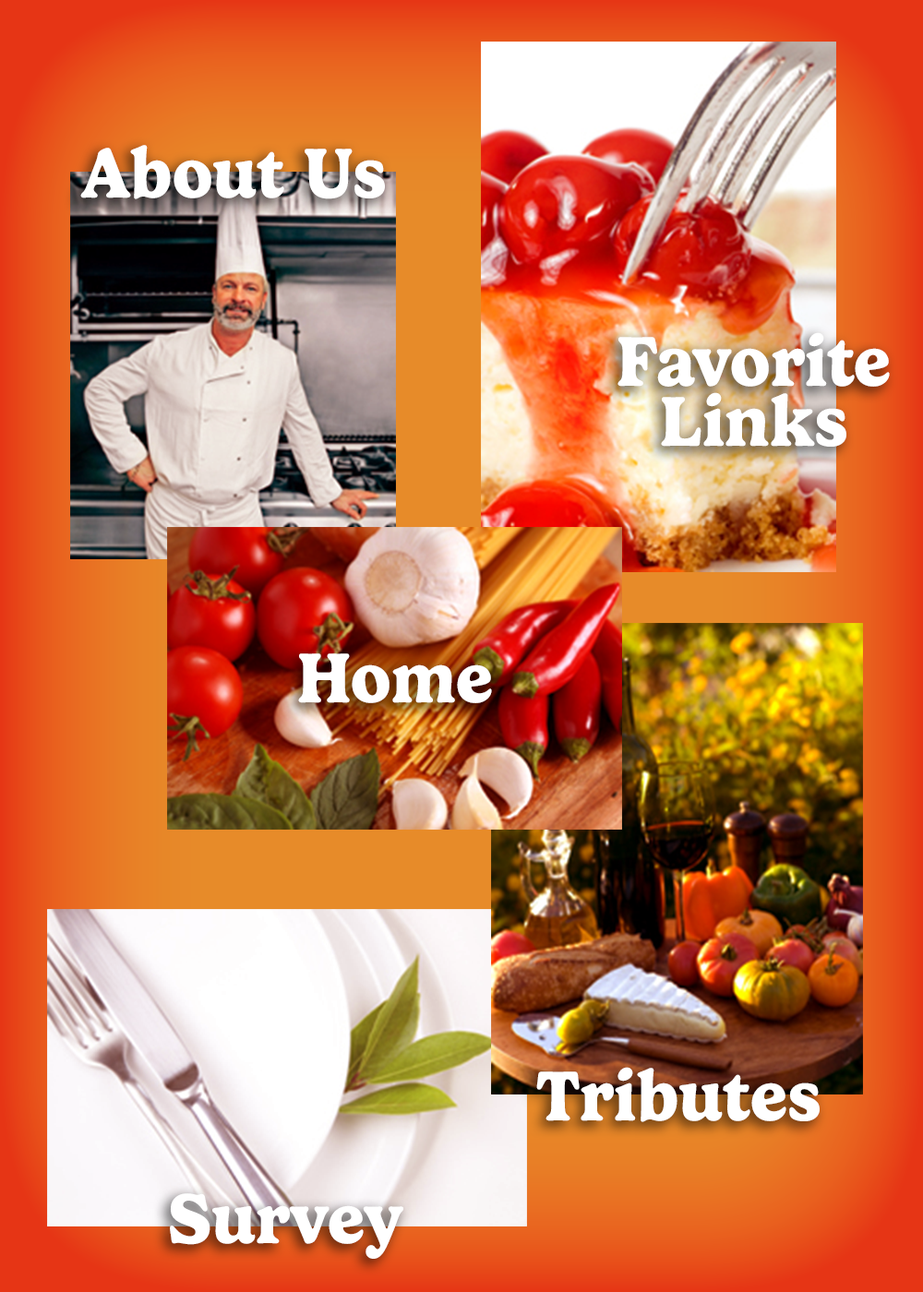
<style>
.page{position:relative;width:923px;height:1292px}
.page>*{position:absolute;margin:0}
.t1{font:71.4px "Gelica-Bold";color:#ffffff}
.t2{font:71.4px/60px "Gelica-Bold";color:#ffffff}
</style>
<div class="page">
<p class="t1" style="left:80px;top:145px;width:305px;height:54px">About Us</p>
<p class="t2" style="left:617px;top:332px;width:273px;height:115px;text-align:center">Favorite<br>Links</p>
<p class="t1" style="left:298px;top:653px;width:194px;height:50px">Home</p>
<p class="t1" style="left:536px;top:1067px;width:284px;height:55px">Tributes</p>
<p class="t1" style="left:170px;top:1193px;width:233px;height:66px">Survey</p>
</div>
